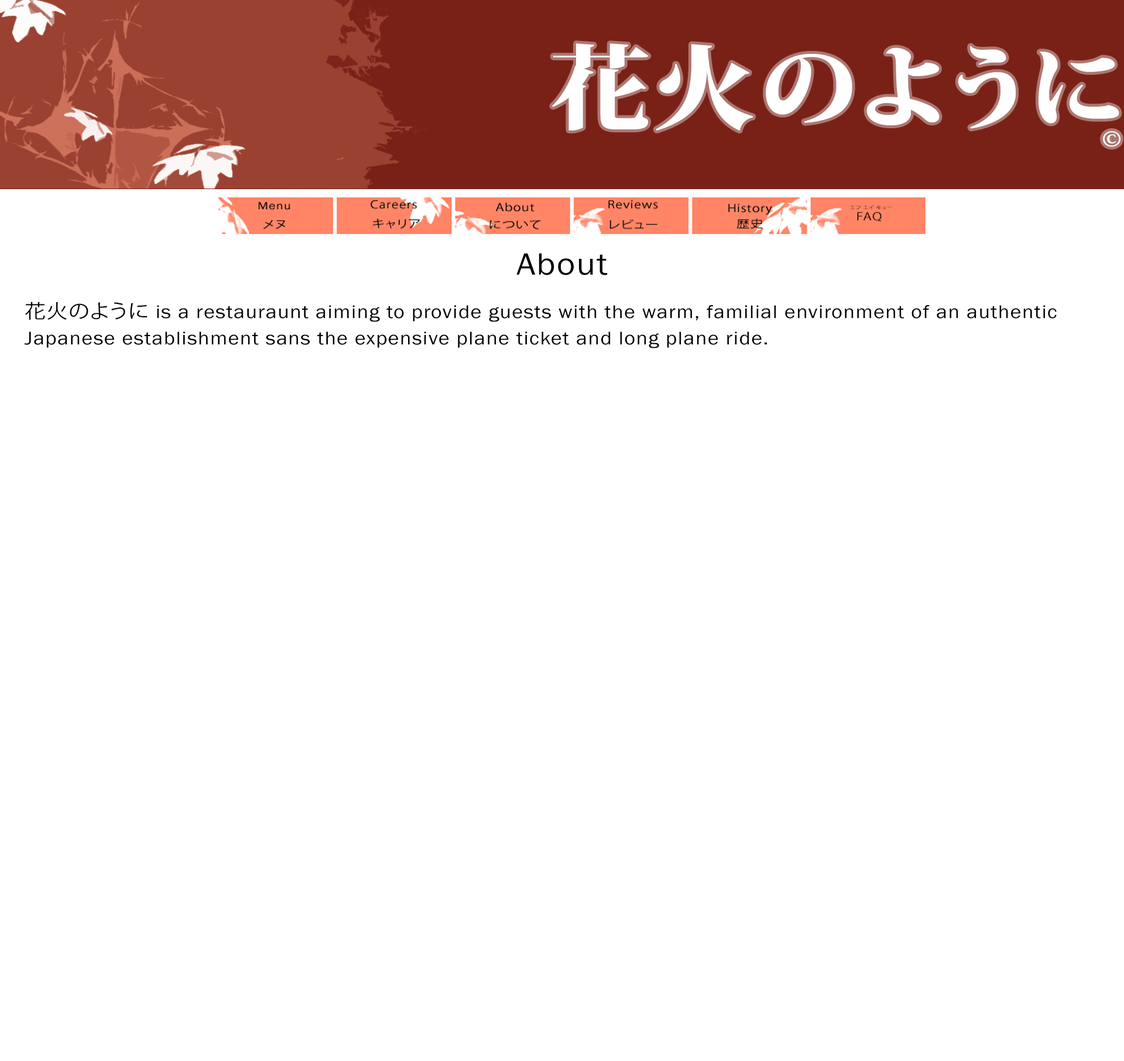
<style>
.page{position:relative;width:1124px;height:1061px;background:#ffffff}
.page>*{position:absolute;margin:0}
.t1{font:32px "FranklinGothic-Book";letter-spacing:0.04em;color:#000000;scale:1.1 1}
.t2{font:19.2px/26.3px "FranklinGothic-Book";letter-spacing:0.04em;color:#000000;scale:1.1 1}
.t3{font:19.2px/26.3px "KozGoPr6N-Regular";letter-spacing:0.04em;color:#000000;scale:1.1 1}
</style>
<div class="page">
<p class="t1" style="left:516px;top:253px;width:92px;height:22px">About</p>
<p class="t2" style="left:25px;top:302px;width:1032px;height:46px"><span class="t3">花火のように </span>is a restauraunt aiming to provide guests with the warm, familial environment of an authentic Japanese establishment sans the expensive plane ticket and long plane ride.</p>
</div>
